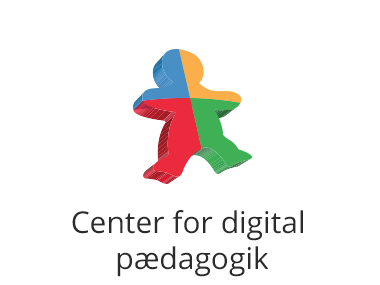
<style>
.page{position:relative;width:380px;height:285px;background:#ffffff}
.page>*{position:absolute;margin:0}
.t1{font:30px "OpenSans";color:#2b2b2b}
</style>
<div class="page">
<p class="t1" style="left:72px;top:210px;width:231px;height:67px;text-align:center">Center for digital <br>pædagogik</p>
</div>
